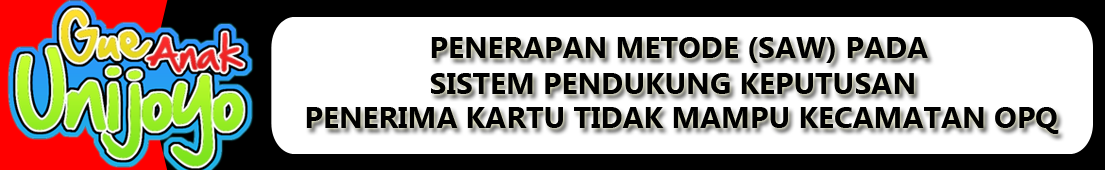
<style>
.page{position:relative;width:1105px;height:170px;background:#ffffff}
.page>*{position:absolute;margin:0}
.t1{font:30px "MicrosoftNewTaiLue-Bold";color:#000000}
</style>
<div class="page">
<p class="t1" style="left:430px;top:37px;width:498px;height:57px">PENERAPAN METODE (SAW) PADA <br>SISTEM PENDUKUNG KEPUTUSAN</p>
<p class="t1" style="left:306px;top:107px;width:753px;height:27px">PENERIMA KARTU TIDAK MAMPU KECAMATAN OPQ</p>
</div>
